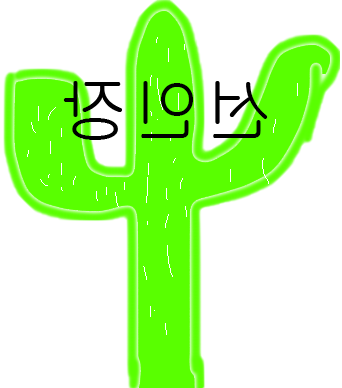
<style>
.page{position:relative;width:342px;height:388px;background:#ffffff}
.page>*{position:absolute;margin:0}
.t1{font:72px "Gulim";color:#000000}
</style>
<div class="page">
<p class="t1" style="left:63px;top:81px;width:205px;height:59px;rotate:180deg">선인장</p>
</div>
